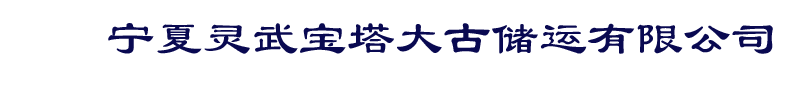
<style>
.page{position:relative;width:800px;height:105px;background:#ffffff}
.page>*{position:absolute;margin:0}
.t1{font:48px "LiSu";color:#090951}
</style>
<div class="page">
<p class="t1" style="left:108px;top:23px;width:665px;height:31px">宁夏灵武宝塔大古储运有限公司</p>
</div>
